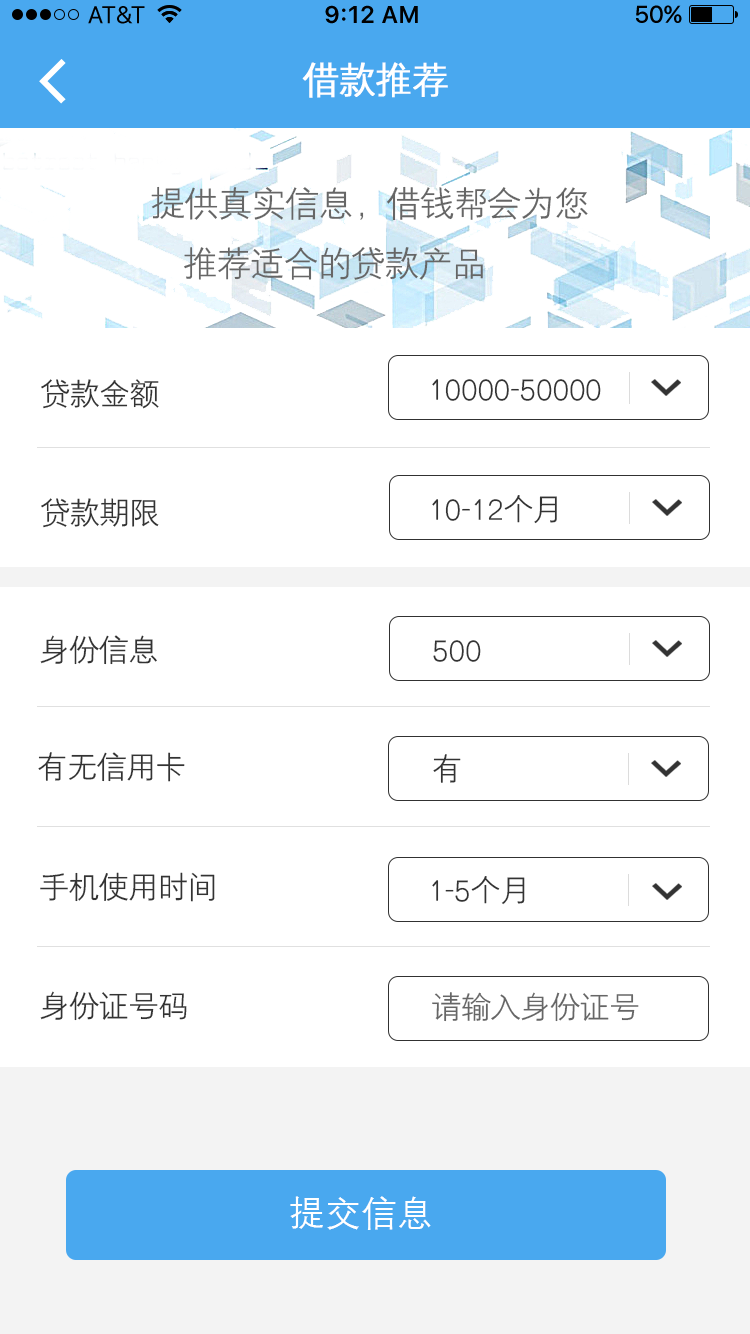
<style>
.page{position:relative;width:750px;height:1334px;background:#ffffff}
.page>*{position:absolute;margin:0}
.t1{font:36px "HYZhongJianHeiJ";letter-spacing:-0.01em;color:#ffffff;font-weight:bold}
.t2{font:34px "HYZhongJianHeiJ";letter-spacing:-0.01em;color:#666666}
.t3{font:30px "HYZhongJianHeiJ";letter-spacing:-0.01em;color:#333333}
.t4{font:30px "HYZhongJianHeiJ";letter-spacing:-0.01em;color:#666666}
.t5{font:36px "HYg2gj";color:#ffffff}
</style>
<div class="page">
<p class="t1" style="left:302px;top:62px;width:146px;height:36px">借款推荐</p>
<p class="t2" style="left:151px;top:186px;width:437px;height:94px">提供真实信息，借钱帮会为您<br>    推荐适合的贷款产品</p>
<p class="t3" style="left:41px;top:379px;width:118px;height:30px">贷款金额</p>
<p class="t3" style="left:432px;top:379px;width:169px;height:22px">10000-50000</p>
<p class="t3" style="left:432px;top:495px;width:125px;height:29px">10-12个月</p>
<p class="t3" style="left:41px;top:498px;width:118px;height:30px">贷款期限</p>
<p class="t3" style="left:40px;top:635px;width:117px;height:30px">身份信息</p>
<p class="t3" style="left:433px;top:640px;width:48px;height:22px">500</p>
<p class="t3" style="left:38px;top:752px;width:147px;height:30px">有无信用卡</p>
<p class="t3" style="left:433px;top:754px;width:28px;height:29px">有</p>
<p class="t3" style="left:40px;top:872px;width:175px;height:30px">手机使用时间</p>
<p class="t3" style="left:432px;top:876px;width:93px;height:29px">1-5个月</p>
<p class="t3" style="left:40px;top:991px;width:147px;height:30px">身份证号码</p>
<p class="t4" style="left:432px;top:992px;width:207px;height:30px">请输入身份证号</p>
<p class="t5" style="left:290px;top:1196px;width:141px;height:34px">提交信息</p>
</div>
